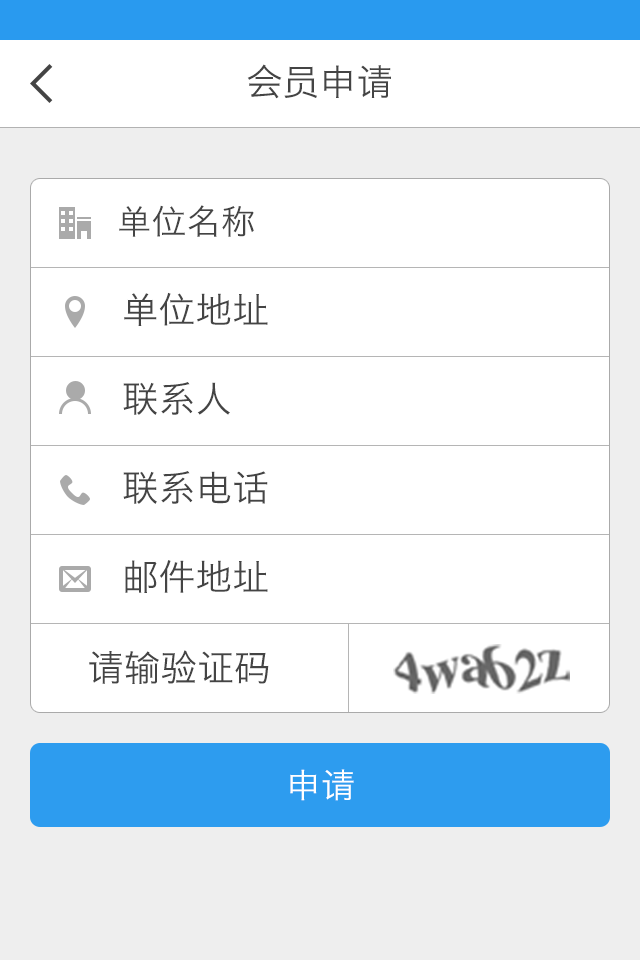
<style>
.page{position:relative;width:640px;height:960px;background:#ffffff}
.page>*{position:absolute;margin:0}
.t1{font:36px "HiraginoSansGB-W3";letter-spacing:0.02em;color:#444444}
.t2{font:34px "HiraginoSansGB-W3";letter-spacing:0.02em;color:#444444}
.t3{font:34px "HiraginoSansGB-W3";letter-spacing:0.02em;color:#ffffff}
</style>
<div class="page">
<p class="t1" style="left:247px;top:64px;width:144px;height:35px">会员申请</p>
<p class="t2" style="left:119px;top:205px;width:135px;height:32px">单位名称</p>
<p class="t1" style="left:124px;top:292px;width:144px;height:34px">单位地址</p>
<p class="t1" style="left:123px;top:382px;width:107px;height:33px">联系人</p>
<p class="t1" style="left:123px;top:471px;width:145px;height:33px">联系电话</p>
<p class="t1" style="left:125px;top:560px;width:143px;height:33px">邮件地址</p>
<p class="t1" style="left:89px;top:650px;width:180px;height:34px">请输验证码</p>
<p class="t3" style="left:290px;top:769px;width:64px;height:32px">申请</p>
</div>
